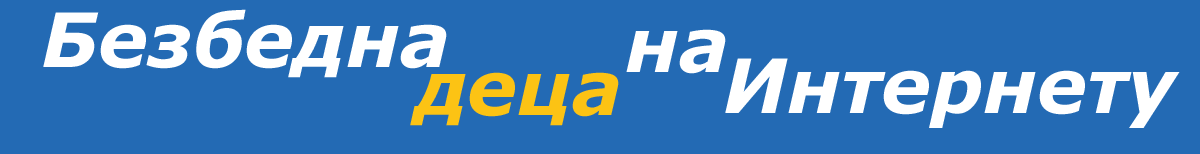
<style>
.page{position:relative;width:1200px;height:154px;background:#236ab4}
.page>*{position:absolute;margin:0}
.t1{font:75px "Verdana-BoldItalic";color:#ffffff}
.t2{font:75px "Verdana-BoldItalic";color:#fcc314}
</style>
<div class="page">
<p class="t1" style="left:43px;top:9px;width:404px;height:69px">Безбедна</p>
<p class="t1" style="left:626px;top:29px;width:100px;height:45px">на</p>
<p class="t1" style="left:725px;top:58px;width:455px;height:70px">Интернету</p>
<p class="t2" style="left:410px;top:72px;width:209px;height:54px">деца</p>
</div>
